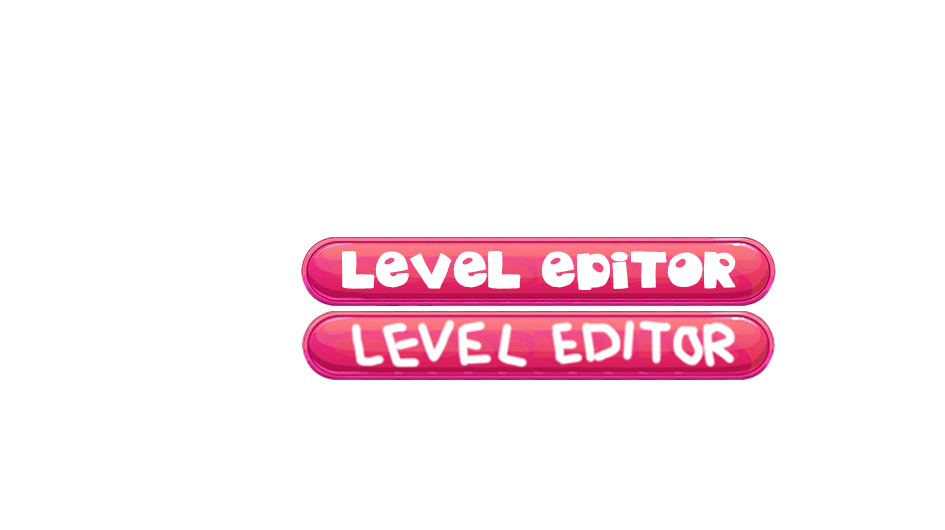
<style>
.page{position:relative;width:945px;height:530px;background:#ffffff}
.page>*{position:absolute;margin:0}
.t1{font:72px "2Peas-Drama-Queen";color:#ffffff}
</style>
<div class="page">
<p class="t1" style="left:341px;top:251px;width:395px;height:39px">LEVEL EDITOR</p>
</div>
